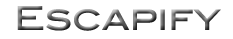
<style>
.page{position:relative;width:233px;height:39px;background:#ffffff}
.page>*{position:absolute;margin:0}
.t1{font:33px "BlairMdITCTTMedium"}
</style>
<div class="page">
<p class="t1" style="left:17px;top:6px;width:204px;height:25px">Escapify</p>
</div>
